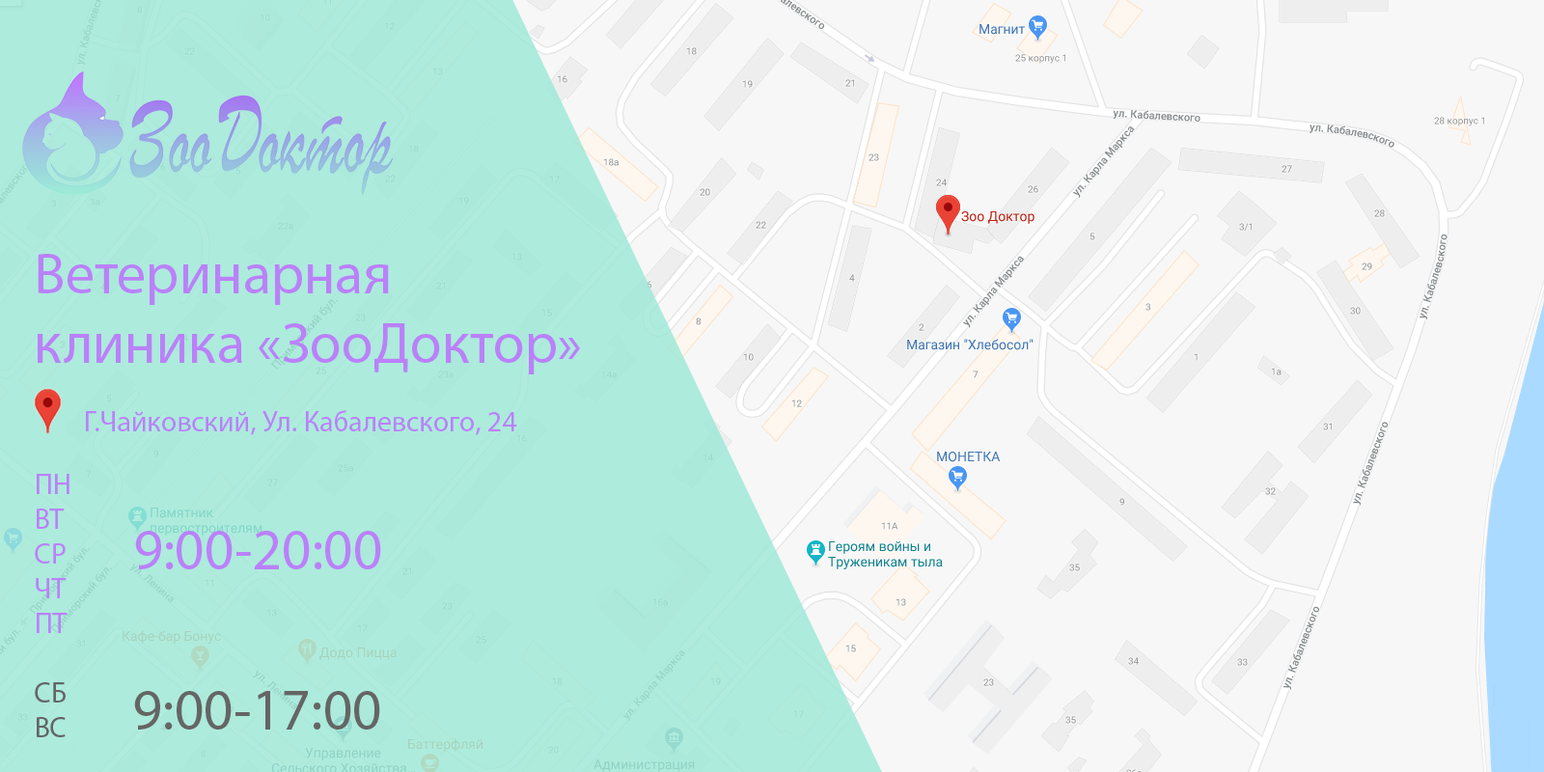
<style>
.page{position:relative;width:1544px;height:772px;background:#f7f7f7}
.page>*{position:absolute;margin:0}
.t1{font:57.9px "MyriadPro-Regular";color:#ba81f9}
.t2{font:29px "MyriadPro-Regular";color:#ba81f9}
.t3{font:29px "MyriadPro-Regular";color:#656565}
.t4{font:57.9px "MyriadPro-Regular";color:#656565}
</style>
<div class="page">
<p class="t1" style="left:38px;top:254px;width:542px;height:120px">Ветеринарная клиника «ЗооДоктор»</p>
<p class="t2" style="left:86px;top:410px;width:431px;height:25px">Г.Чайковский, Ул. Кабалевского, 24</p>
<p class="t2" style="left:35px;top:474px;width:34px;height:263px">ПН<br>ВТ<br>СР <br>ЧТ<br>ПТ<br><br><span class="t3">СБ<br>ВС</span></p>
<p class="t1" style="left:135px;top:531px;width:246px;height:38px">9:00-20:00</p>
<p class="t4" style="left:134px;top:691px;width:246px;height:39px">9:00-17:00</p>
</div>
